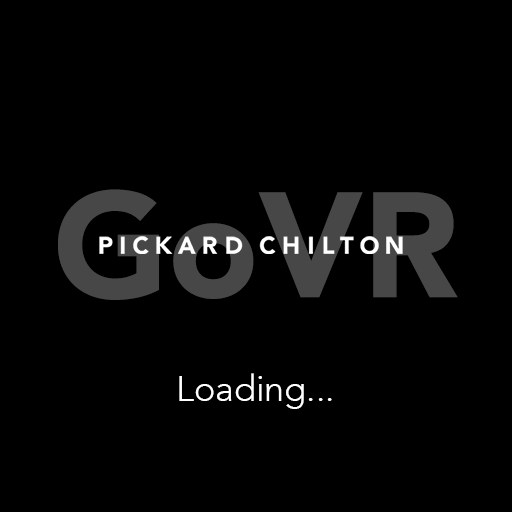
<style>
.page{position:relative;width:512px;height:512px;background:#000000}
.page>*{position:absolute;margin:0}
.t1{font:148px "AvenirLTCom-Black";color:#474747}
.t2{font:36px "AvenirLTCom-Light";color:#ffffff}
</style>
<div class="page">
<p class="t1" style="left:58px;top:189px;width:400px;height:111px">GoVR</p>
<p class="t2" style="left:179px;top:373px;width:153px;height:36px">Loading...</p>
</div>
